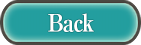
<style>
.page{position:relative;width:141px;height:45px}
.page>*{position:absolute;margin:0}
.t1{font:24px "RyuminPro-ExBold";letter-spacing:-0.08em;color:#ffffff;scale:0.9 1}
</style>
<div class="page">
<p class="t1" style="left:48px;top:13px;width:46px;height:19px">Back</p>
</div>
